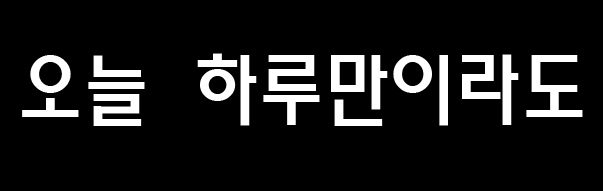
<style>
.page{position:relative;width:603px;height:191px;background:#000000}
.page>*{position:absolute;margin:0}
.t1{font:80px "MoeumTR-HM";color:#ffffff}
</style>
<div class="page">
<p class="t1" style="left:22px;top:53px;width:561px;height:73px">오늘 하루만이라도</p>
</div>
